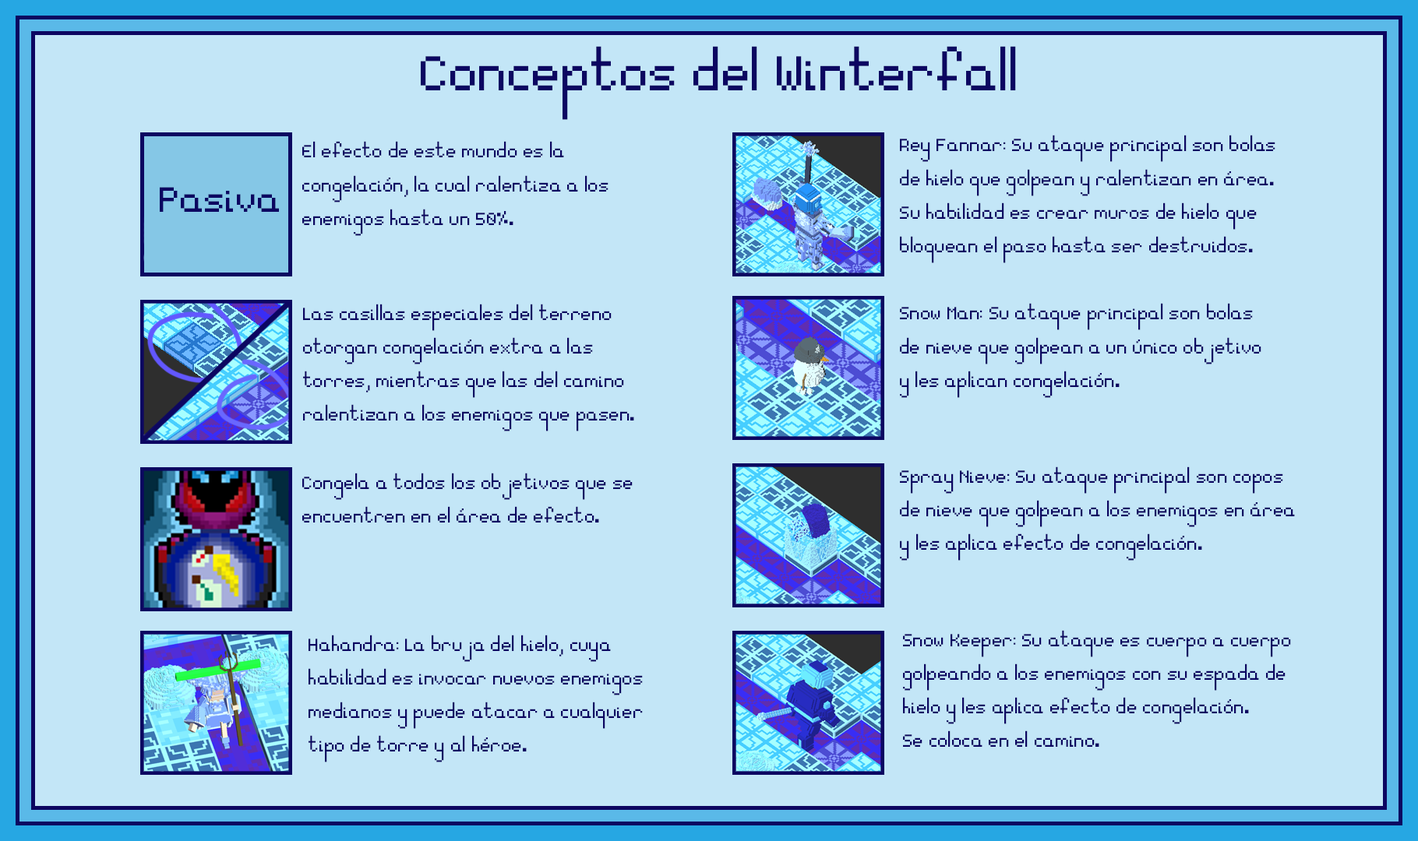
<style>
.page{position:relative;width:1418px;height:841px;background:#c3e6f7}
.page>*{position:absolute;margin:0}
.t1{font:77.9px "Essential";color:#0c0661}
.t2{font:28px "Essential";color:#0c0661}
.t3{font:56.1px "Essential";color:#0c0661}
</style>
<div class="page">
<p class="t1" style="left:421px;top:46px;width:595px;height:74px">Conceptos del Winterfall</p>
<p class="t2" style="left:900px;top:135px;width:375px;height:128px">Rey Fannar: Su ataque principal son bolas <br>de hielo que golpean y ralentizan en área. <br>Su habilidad es crear muros de hielo que <br>bloquean el paso hasta ser destruidos.</p>
<p class="t2" style="left:302px;top:141px;width:306px;height:95px">El efecto de este mundo es la<br>congelación, la cual ralentiza a los <br>enemigos hasta un 50%.</p>
<p class="t3" style="left:160px;top:187px;width:119px;height:25px">Pasiva</p>
<p class="t2" style="left:303px;top:304px;width:331px;height:127px">Las casillas especiales del terreno<br>otorgan congelación extra a las<br>torres, mientras que las del camino<br>ralentizan a los enemigos que pasen.</p>
<p class="t2" style="left:900px;top:303px;width:361px;height:95px">Snow Man: Su ataque principal son bolas<br>de nieve que golpean a un único objetivo <br>y les aplican congelación.</p>
<p class="t2" style="left:302px;top:473px;width:330px;height:50px">Congela a todos los objetivos que se<br>encuentren en el área de efecto.</p>
<p class="t2" style="left:900px;top:467px;width:394px;height:94px">Spray Nieve: Su ataque principal son copos<br>de nieve que golpean a los enemigos en área<br>y les aplica efecto de congelación.</p>
<p class="t2" style="left:308px;top:635px;width:335px;height:128px">Hahandra: La bruja del hielo, cuya <br>habilidad es invocar nuevos enemigos <br>medianos y puede atacar a cualquier <br>tipo de torre y al héroe.</p>
<p class="t2" style="left:903px;top:630px;width:388px;height:117px">Snow Keeper: Su ataque es cuerpo a cuerpo<br>golpeando a los enemigos con su espada de<br>hielo y les aplica efecto de congelación. <br>Se coloca en el camino.</p>
</div>
